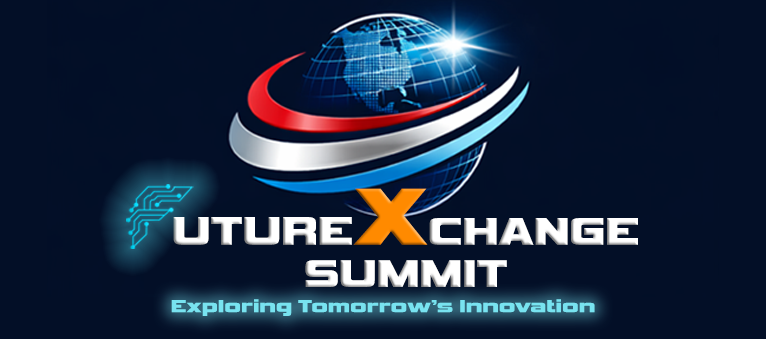
<style>
.page{position:relative;width:766px;height:339px;background:#030f27}
.page>*{position:absolute;margin:0}
.t1{font:40.6px "Vipnagorgialla-Bold";color:#ffffff}
.t2{font:61.6px "Vipnagorgialla-Bold";color:#ffffff}
.t3{font:41.8px "Vipnagorgialla-Bold";color:#ffffff}
.t4{font:84.9px "Vipnagorgialla-Bold";color:#ff8a00}
.t5{font:18.4px "Vipnagorgialla-Bold";color:#78e3f0}
</style>
<div class="page">
<p class="t1" style="left:173px;top:188px;width:465px;height:57px"><span class="t2"> </span><span class="t3">UTURE</span><span class="t4">X</span>CHANGE</p>
<p class="t1" style="left:305px;top:260px;width:202px;height:27px">SUMMIT</p>
<p class="t5" style="left:171px;top:299px;width:424px;height:17px">Exploring Tomorrow’s Innovation</p>
</div>
